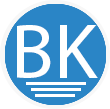
<style>
.page{position:relative;width:110px;height:109px;background:#2a85c6}
.page>*{position:absolute;margin:0}
.t1{font:78.9px "MyriadPro-Regular";color:#ffffff}
</style>
<div class="page">
<p class="t1" style="left:17px;top:25px;width:81px;height:53px">BK</p>
</div>
